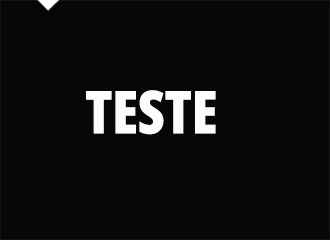
<style>
.page{position:relative;width:330px;height:240px;background:#070707}
.page>*{position:absolute;margin:0}
.t1{font:59.6px "OpenSansCondensed-ExtraBold";letter-spacing:-0.01em;color:#fafdfa;text-transform:uppercase}
</style>
<div class="page">
<p class="t1" style="left:86px;top:90px;width:130px;height:45px">teste</p>
</div>
